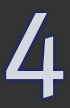
<style>
.page{position:relative;width:70px;height:108px;background:#333333}
.page>*{position:absolute;margin:0}
.t1{font:125.2px "MetaPlusLF-Regular";color:#d6d8e1}
</style>
<div class="page">
<p class="t1" style="left:6px;top:13px;width:58px;height:85px">4</p>
</div>
